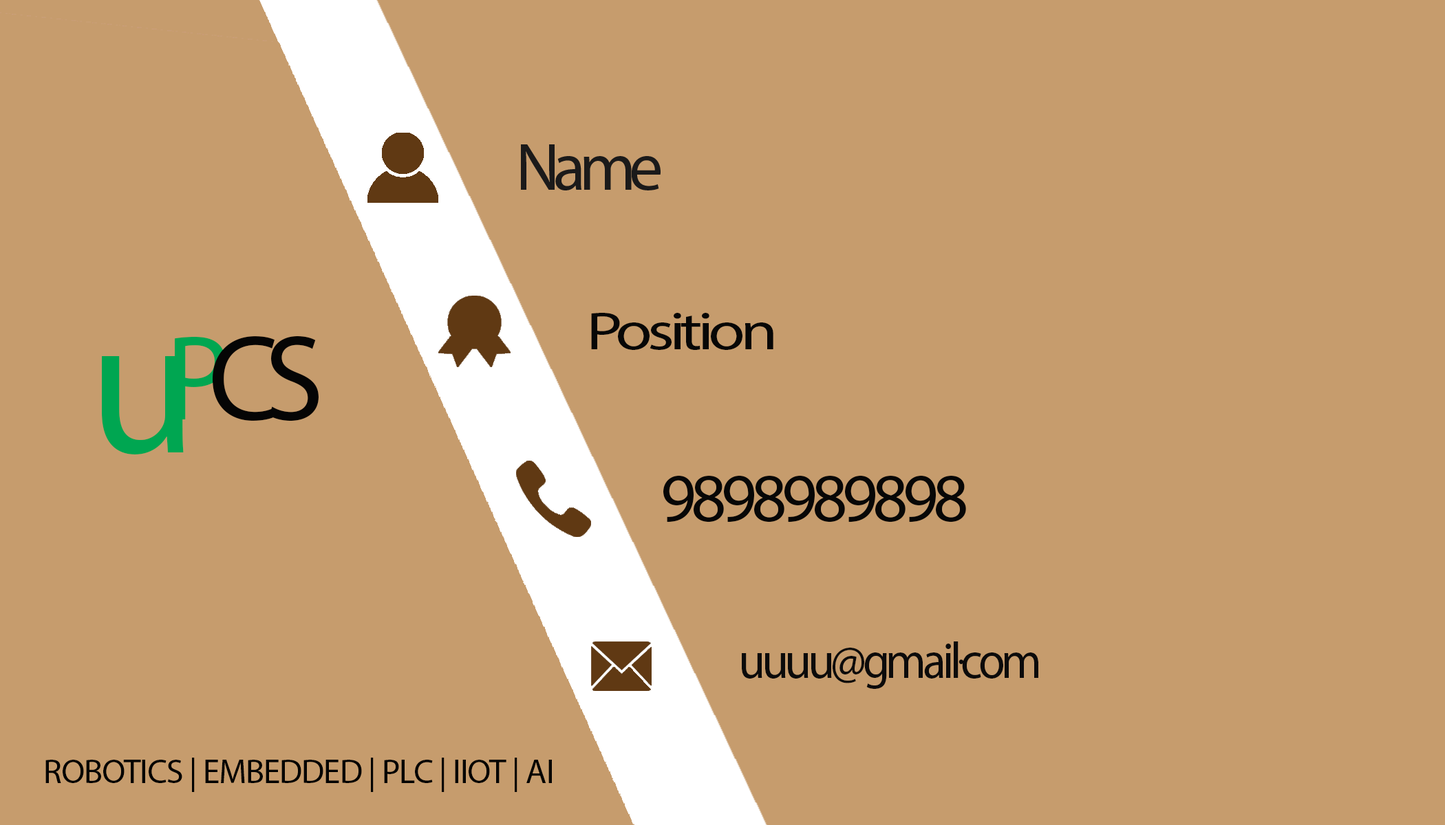
<style>
.page{position:relative;width:1445px;height:825px;background:#c69c6d}
.page>*{position:absolute;margin:0}
.t1{font:53.9px "MyriadPro-Regular";letter-spacing:-0.075em;color:#070707;scale:1.26 1}
.t2{font:121.2px "MyriadPro-Regular";letter-spacing:-0.1em;color:#050505}
.t3{font:198.3px "MyriadPro-Regular";letter-spacing:-0.15em;color:#00a651}
.t4{font:121.2px "MyriadPro-Regular";letter-spacing:-0.15em;color:#00a651}
.t5{font:68.8px "MyriadPro-Regular";letter-spacing:-0.075em;color:#070707}
.t6{font:51.1px "MyriadPro-Regular";letter-spacing:-0.075em;color:#0c0b0b;scale:0.95 1}
.t7{font:34.4px "MyriadPro-Regular";letter-spacing:-0.025em;color:#020202}
</style>
<div class="page">
<p class="t1" style="left:591px;top:313px;width:182px;height:37px">Position</p>
<p class="t2" style="left:102px;top:336px;width:216px;height:119px"><span class="t3">u</span><span class="t4">P</span>CS</p>
<p class="t5" style="left:663px;top:475px;width:303px;height:48px">9898989898</p>
<p class="t6" style="left:742px;top:642px;width:296px;height:47px">uuuu@gmail.com</p>
<p class="t7" style="left:45px;top:758px;width:507px;height:34px">ROBOTICS | EMBEDDED | PLC | IIOT | AI</p>
</div>
